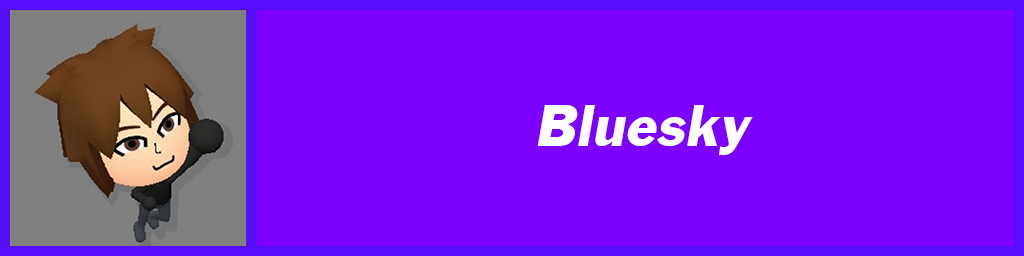
<style>
.page{position:relative;width:1024px;height:256px;background:#7d01ff}
.page>*{position:absolute;margin:0}
.t1{font:61.1px "FranklinGothicITALIC";color:#ffffff}
</style>
<div class="page">
<p class="t1" style="left:537px;top:105px;width:216px;height:50px">Bluesky</p>
</div>
